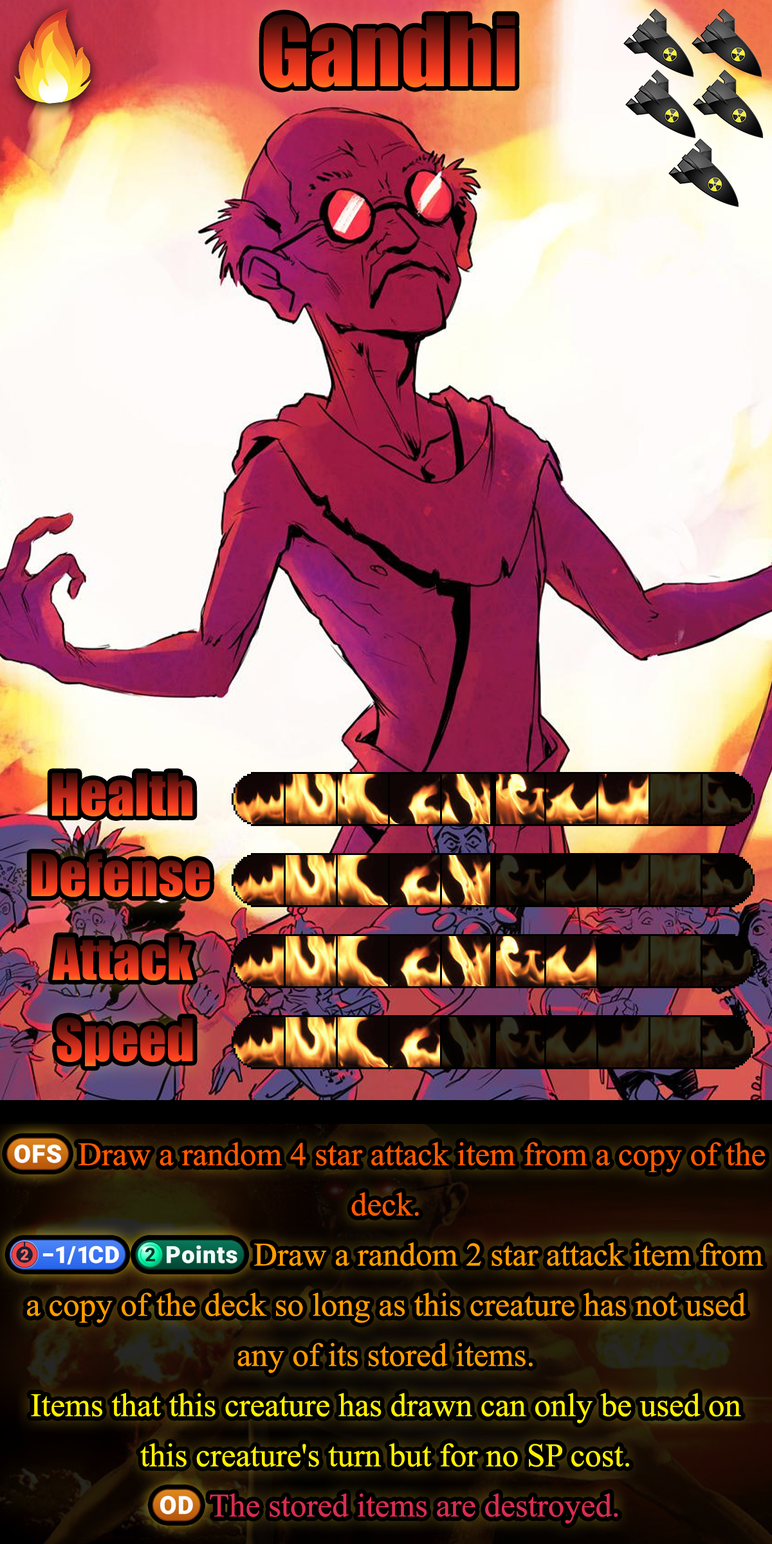
<style>
.page{position:relative;width:772px;height:1544px}
.page>*{position:absolute;margin:0}
.t1{font:152.5px "Impact"}
.t2{font:92.7px "Impact"}
.t3{font:32.8px/50.2px "TimesNewRomanPSMT";color:#ff9c00}
.t4{font:32.8px/50.2px "stoogedings-Regular";color:#ff5a00}
.t5{font:32.8px/50.2px "TimesNewRomanPSMT";color:#ff5a00}
.t6{font:30.9px/50.2px "stoogedings-Regular";letter-spacing:0.25em;color:#ff9c00}
.t7{font:30.9px/50.2px "stoogedings-Regular";color:#ff9c00}
.t8{font:32.8px/50.2px "TimesNewRomanPSMT";color:#fff000}
.t9{font:32.8px/50.2px "stoogedings-Regular";color:#d82e50}
.t10{font:32.8px/50.2px "TimesNewRomanPSMT";color:#d82e50}
</style>
<div class="page">
<p class="t1" style="left:263px;top:14px;width:252px;height:74px">Gandhi</p>
<p class="t2" style="left:51px;top:773px;width:142px;height:44px">Health</p>
<p class="t2" style="left:31px;top:853px;width:179px;height:44px">Defense</p>
<p class="t2" style="left:52px;top:937px;width:142px;height:44px">Attack</p>
<p class="t2" style="left:56px;top:1017px;width:137px;height:50px">Speed</p>
<p class="t3" style="left:6px;top:1138px;width:759px;height:386px;text-align:center"><span class="t4">(OFS)</span><span class="t5"> Draw a random 4 star attack item from a copy of the deck.<br></span><span class="t6">(-1/1CD)</span><span class="t7">(2 points)</span> Draw a random 2 star attack item from a copy of the deck so long as this creature has not used any of its stored items.<br><span class="t8">Items that this creature has drawn can only be used on this creature's turn but for no SP cost.<br></span><span class="t9">(OD)</span><span class="t10"> The stored items are destroyed.</span></p>
</div>
